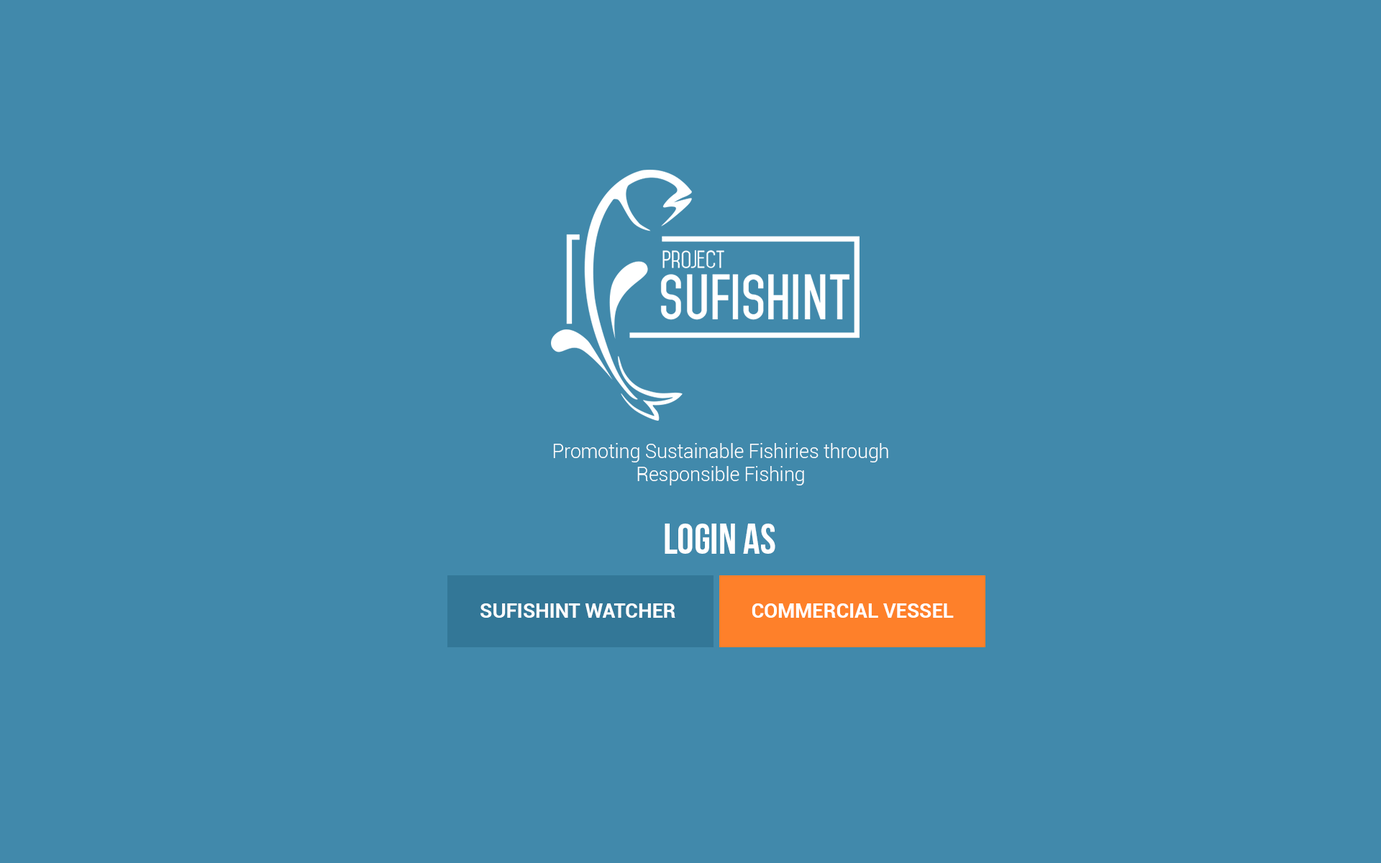
<style>
.page{position:relative;width:1381px;height:863px;background:#4189ab}
.page>*{position:absolute;margin:0}
.t1{font:19.2px "Roboto-Light";color:#ffffff}
.t2{font:42.2px "BebasNeue";color:#ffffff}
.t3{font:19.9px "Roboto-Bold";color:#ffffff}
</style>
<div class="page">
<p class="t1" style="left:553px;top:443px;width:335px;height:43px;text-align:center">Promoting Sustainable Fishiries through <br>Responsible Fishing</p>
<p class="t2" style="left:665px;top:524px;width:111px;height:30px">login as</p>
<p class="t3" style="left:481px;top:604px;width:195px;height:14px">SUFISHINT WATCHER</p>
<p class="t3" style="left:752px;top:604px;width:202px;height:14px">COMMERCIAL VESSEL</p>
</div>
